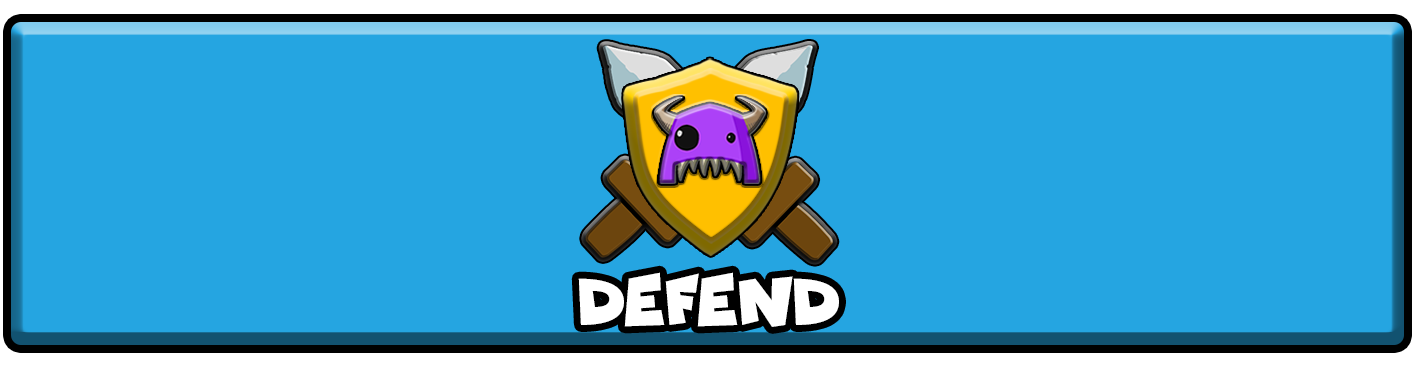
<style>
.page{position:relative;width:1421px;height:367px;background:#25a5e1}
.page>*{position:absolute;margin:0}
.t1{font:67.6px "Funhouse";color:#ffffff}
</style>
<div class="page">
<p class="t1" style="left:578px;top:272px;width:261px;height:55px">DEFEND</p>
</div>
